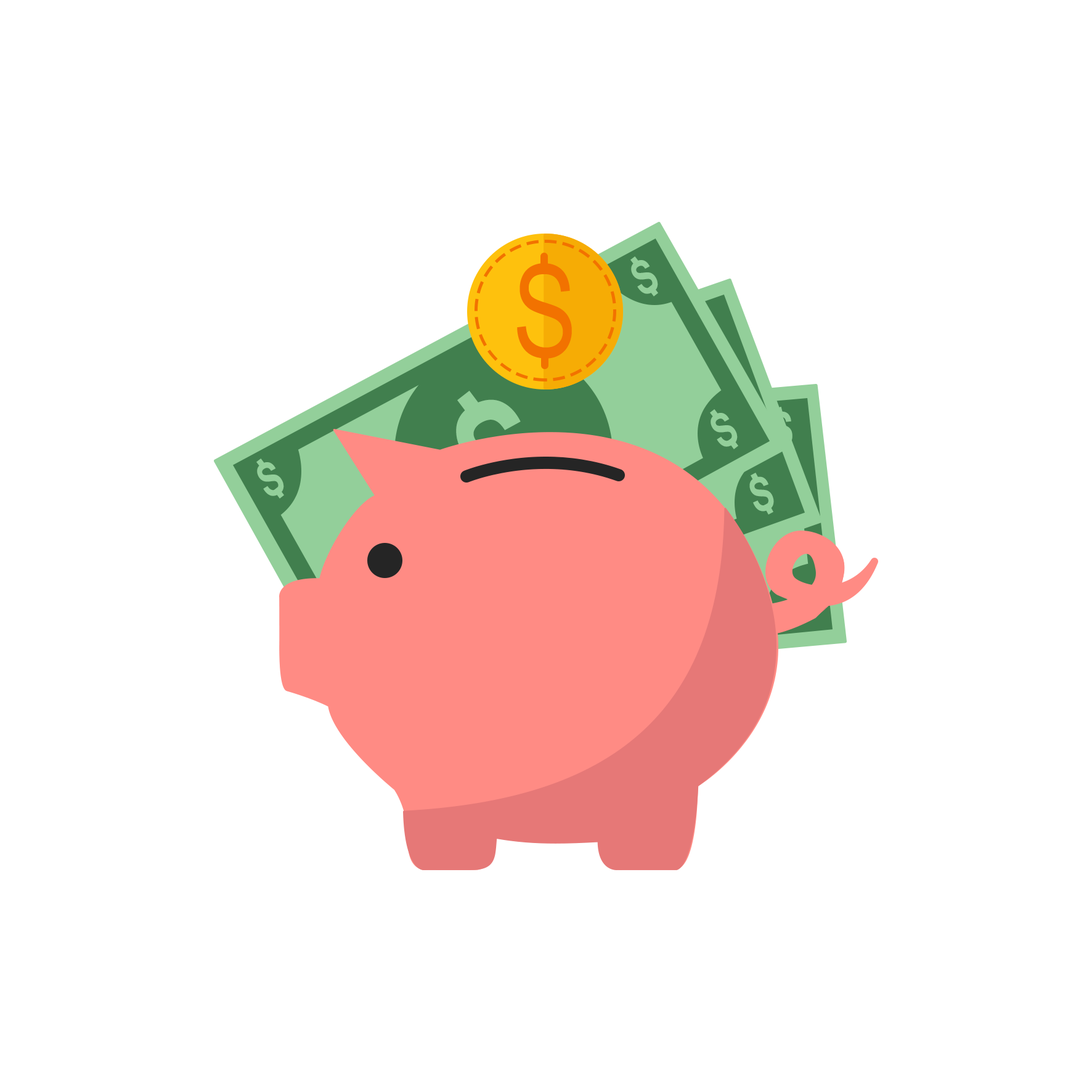
<style>
.page{position:relative;width:1092px;height:1092px;background:#ffffff}
.page>*{position:absolute;margin:0}
.t1{font:128.4px "ArialMT";color:#f27200}
.t2{font:47px "Arial-BoldMT";color:#93cf9a}
</style>
<div class="page">
<p class="t1" style="left:517px;top:263px;width:55px;height:96px">S</p>
<p class="t2" style="left:631px;top:260px;width:27px;height:34px;rotate:-25deg">S</p>
<p class="t2" style="left:711px;top:413px;width:27px;height:34px;rotate:-25deg">S</p>
<p class="t2" style="left:772px;top:411px;width:20px;height:36px;rotate:-2deg">S</p>
<p class="t2" style="left:257px;top:462px;width:27px;height:34px;rotate:-25deg">S</p>
<p class="t2" style="left:749px;top:476px;width:25px;height:35px;rotate:-16deg">S</p>
</div>
